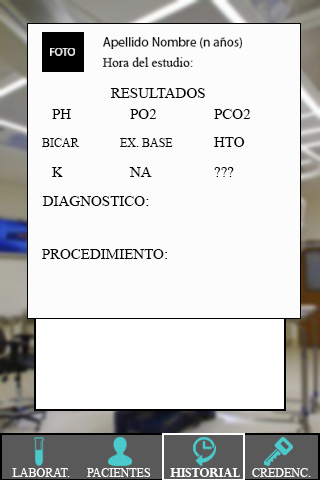
<style>
.page{position:relative;width:320px;height:480px;background:#fcfcfc}
.page>*{position:absolute;margin:0}
.t1{font:13.1px "MyriadPro-Regular";color:#080808}
.t2{font:10.7px "MyriadPro-Regular";color:#ffffff;scale:1.05 1}
.t3{font:13.1px "MyriadPro-Regular";color:#020202}
.t4{font:15px "MyriadPro-Regular";color:#050505}
.t5{font:12px "MyriadPro-Regular";color:#050505}
.t6{font:15px "MyriadPro-Regular";color:#060606}
.t7{font:12px "MyriadPro-Regular";color:#ffffff}
.t8{font:12px "PerpetuaTitlingMT-Bold";color:#fefefe}
</style>
<div class="page">
<p class="t1" style="left:103px;top:37px;width:139px;height:12px">Apellido Nombre (n años)</p>
<p class="t2" style="left:50px;top:48px;width:25px;height:8px">FOTO</p>
<p class="t3" style="left:103px;top:57px;width:90px;height:10px">Hora del estudio:</p>
<p class="t4" style="left:111px;top:88px;width:94px;height:10px">RESULTADOS</p>
<p class="t4" style="left:52px;top:109px;width:19px;height:10px">PH</p>
<p class="t4" style="left:130px;top:109px;width:27px;height:10px">PO2</p>
<p class="t4" style="left:214px;top:109px;width:37px;height:10px">PCO2</p>
<p class="t4" style="left:214px;top:137px;width:31px;height:10px">HTO</p>
<p class="t5" style="left:42px;top:138px;width:37px;height:9px">BICAR</p>
<p class="t5" style="left:120px;top:138px;width:53px;height:9px">EX. BASE</p>
<p class="t4" style="left:52px;top:167px;width:11px;height:10px">K</p>
<p class="t4" style="left:129px;top:167px;width:23px;height:10px">NA</p>
<p class="t4" style="left:214px;top:167px;width:20px;height:10px">???</p>
<p class="t4" style="left:42px;top:196px;width:107px;height:10px">DIAGNOSTICO:</p>
<p class="t6" style="left:42px;top:249px;width:125px;height:10px">PROCEDIMIENTO:</p>
<p class="t7" style="left:12px;top:468px;width:58px;height:9px">LABORAT.</p>
<p class="t7" style="left:87px;top:468px;width:64px;height:9px">PACIENTES</p>
<p class="t8" style="left:170px;top:468px;width:70px;height:9px">HISTORIAL</p>
<p class="t7" style="left:252px;top:468px;width:59px;height:9px">CREDENC.</p>
</div>
